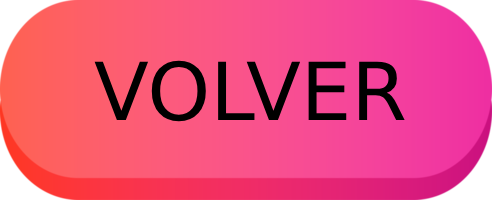
<style>
.page{position:relative;width:492px;height:200px}
.page>*{position:absolute;margin:0}
.t1{font:80px "DejaVuSans";color:#000000}
</style>
<div class="page">
<p class="t1" style="left:94px;top:60px;width:311px;height:62px">VOLVER</p>
</div>
